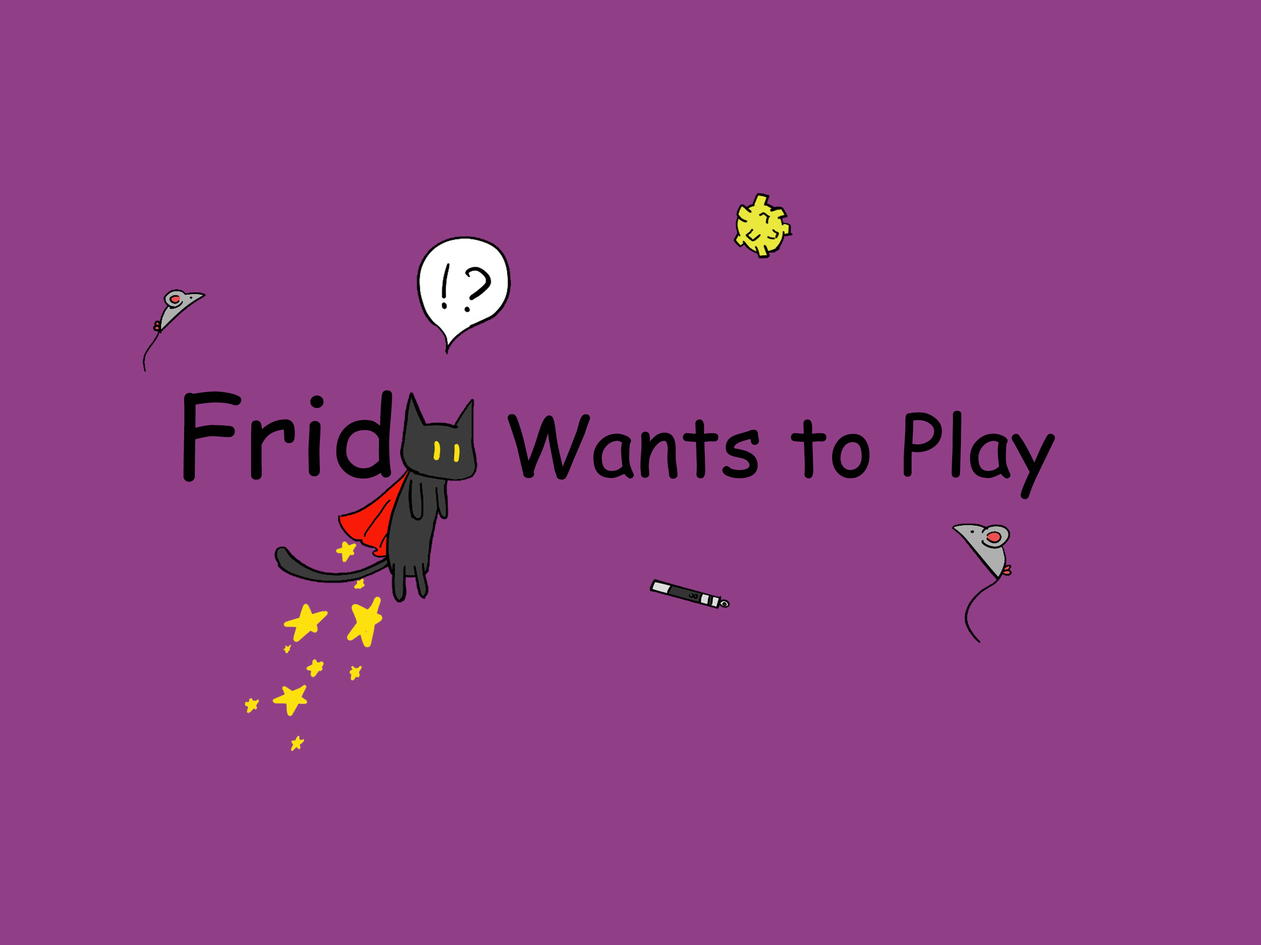
<style>
.page{position:relative;width:1261px;height:945px;background:#903f87}
.page>*{position:absolute;margin:0}
.t1{font:110.1px "ComicSansMS";color:#010101;scale:1.04 1}
.t2{font:82.6px "ComicSansMS";color:#010101;scale:1.04 1}
</style>
<div class="page">
<p class="t1" style="left:183px;top:390px;width:209px;height:92px">Frid</p>
<p class="t2" style="left:508px;top:411px;width:547px;height:89px">Wants to Play</p>
</div>
